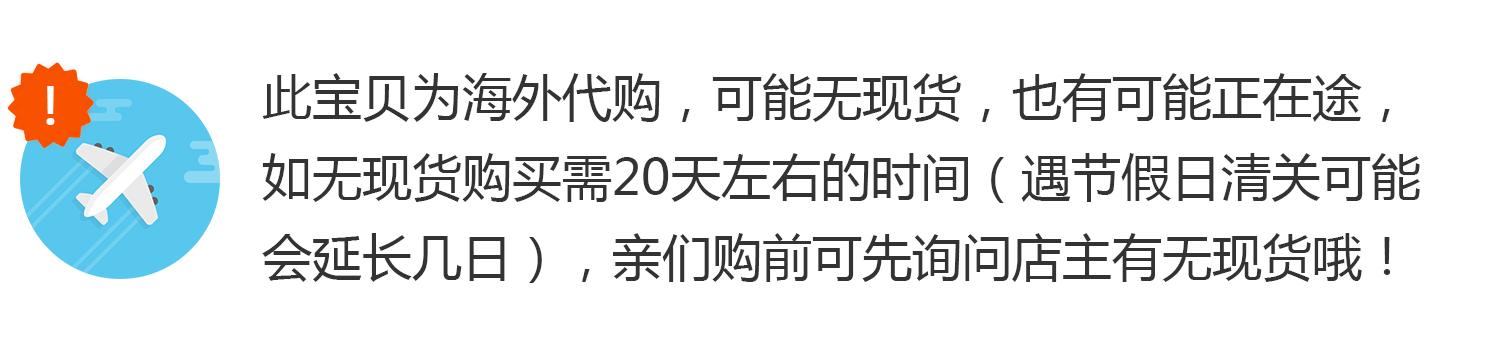
<style>
.page{position:relative;width:1500px;height:360px;background:#ffffff}
.page>*{position:absolute;margin:0}
.t1{font:50px/80px "MicrosoftYaHei";color:#333333}
.t2{font:50px "MicrosoftYaHei";color:#ffffff;font-weight:bold}
</style>
<div class="page">
<p class="t1" style="left:262px;top:73px;width:1158px;height:210px">此宝贝为海外代购，可能无现货，也有可能正在途，<br>如无现货购买需20天左右的时间（遇节假日清关可能<br>会延长几日），亲们购前可先询问店主有无现货哦！</p>
<p class="t2" style="left:46px;top:86px;width:9px;height:39px">!</p>
</div>
